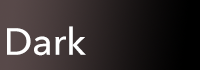
<style>
.page{position:relative;width:200px;height:70px}
.page>*{position:absolute;margin:0}
.t1{font:37.5px "AvenirNext-Medium";color:#ffffff}
</style>
<div class="page">
<p class="t1" style="left:7px;top:26px;width:79px;height:30px">Dark</p>
</div>
